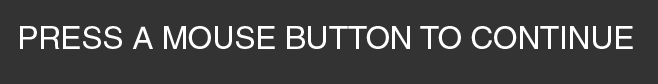
<style>
.page{position:relative;width:658px;height:84px;background:#333333}
.page>*{position:absolute;margin:0}
.t1{font:31.4px "Helvetica";letter-spacing:-0.005em;color:#ffffff}
</style>
<div class="page">
<p class="t1" style="left:20px;top:26px;width:613px;height:23px">PRESS A MOUSE BUTTON TO CONTINUE</p>
</div>
